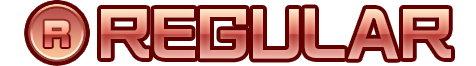
<style>
.page{position:relative;width:476px;height:66px;background:#ffffff}
.page>*{position:absolute;margin:0}
.t1{font:56px "KafuTechnoStd-U";letter-spacing:0.019em}
.t2{font:41.3px "DFSoGeiStd-W9";letter-spacing:0.05em;scale:0.9 1}
</style>
<div class="page">
<p class="t1" style="left:101px;top:8px;width:350px;height:51px">REGULAR</p>
<p class="t2" style="left:44px;top:20px;width:25px;height:27px">R</p>
</div>
